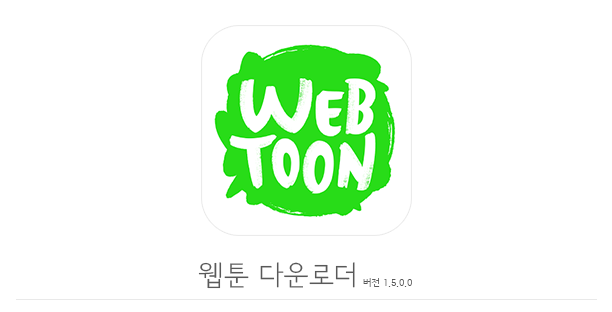
<style>
.page{position:relative;width:612px;height:312px;background:#ffffff}
.page>*{position:absolute;margin:0}
.t1{font:27.6px "SeoulNamsanL";color:#595959}
.t2{font:10px "SeoulNamsanL";color:#595959}
</style>
<div class="page">
<p class="t1" style="left:198px;top:262px;width:157px;height:27px">웹툰 다운로더</p>
<p class="t2" style="left:363px;top:278px;width:49px;height:9px">버전 1.5.0.0</p>
</div>
